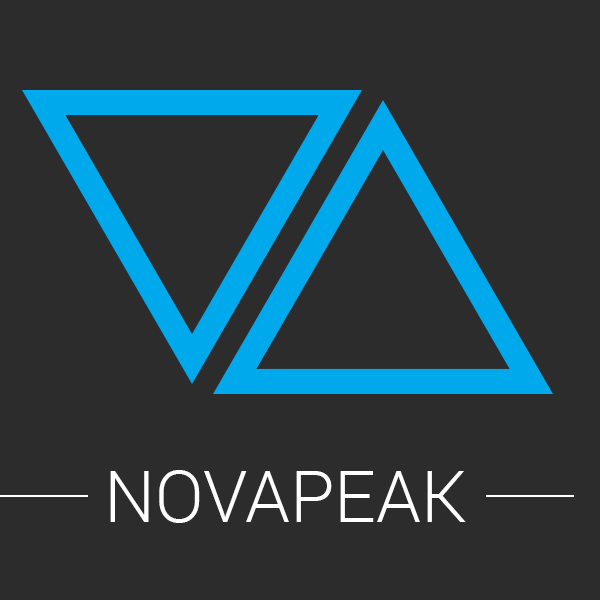
<style>
.page{position:relative;width:600px;height:600px;background:#2c2c2c}
.page>*{position:absolute;margin:0}
.t1{font:72px "Roboto-Light";color:#ffffff}
</style>
<div class="page">
<p class="t1" style="left:110px;top:470px;width:356px;height:53px">NOVAPEAK</p>
</div>
